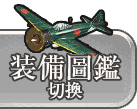
<style>
.page{position:relative;width:137px;height:109px}
.page>*{position:absolute;margin:0}
.t1{font:28px/28px "RyuminPr6N-Medium";color:#fff8f3}
.t2{font:18px/28px "RyuminPr6N-Medium";color:#fff8f3}
</style>
<div class="page">
<p class="t1" style="left:10px;top:54px;width:111px;height:45px;text-align:center">裝備圖鑑<br><span class="t2">切換</span></p>
</div>
